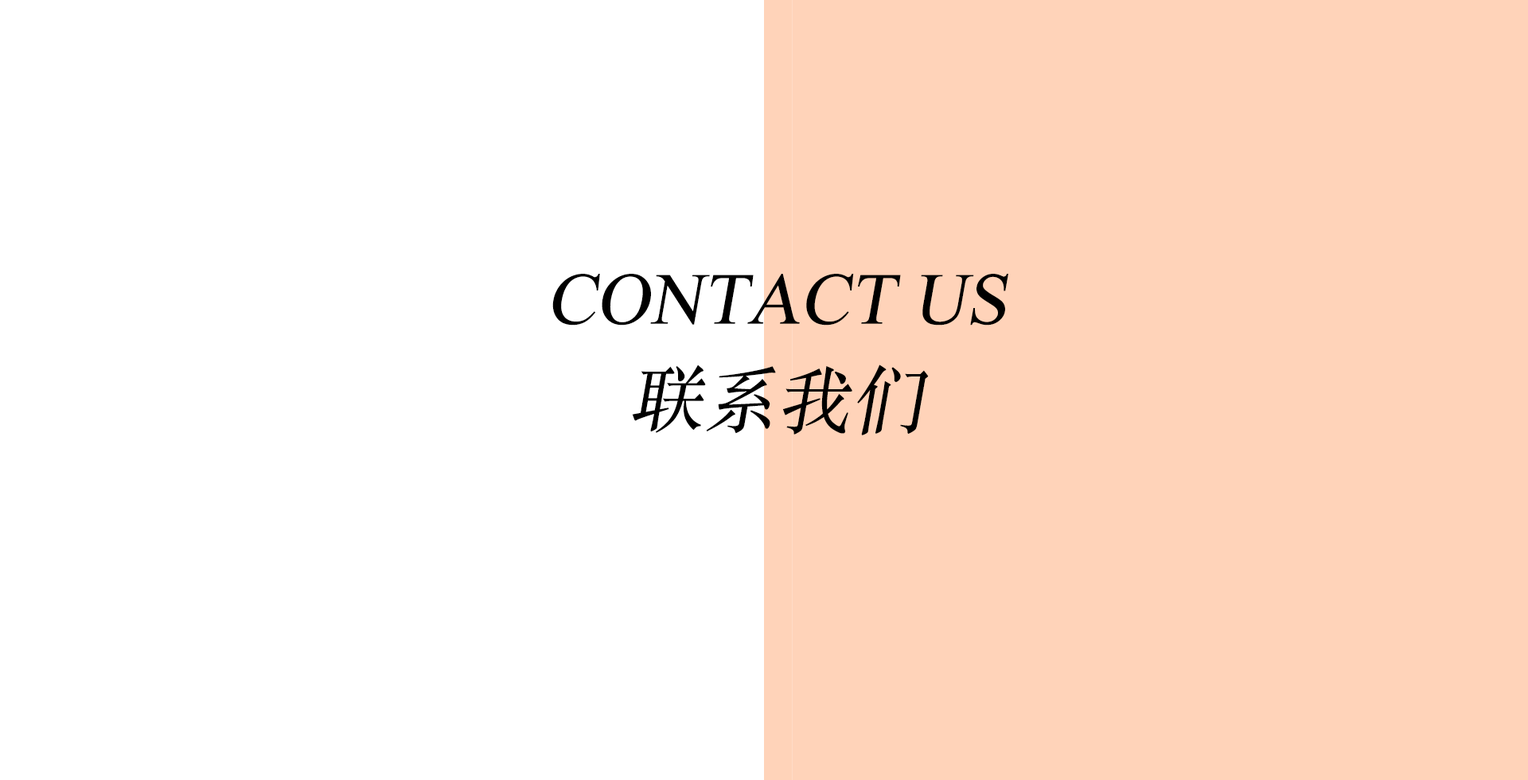
<style>
.page{position:relative;width:1528px;height:780px;background:#ffffff}
.page>*{position:absolute;margin:0}
.t1{font:73.6px "TimesNewRomanPSMT";color:#000000;font-style:italic}
.t2{font:73.6px "STSongti-SC-Regular";color:#000000;font-style:italic}
</style>
<div class="page">
<p class="t1" style="left:552px;top:274px;width:457px;height:161px;text-align:center">CONTACT US<br><span class="t2">联系我们</span></p>
</div>
